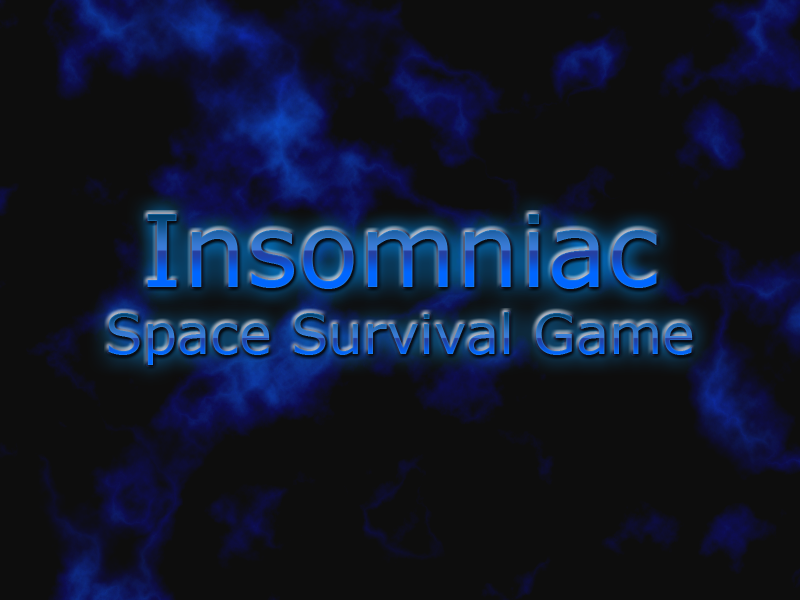
<style>
.page{position:relative;width:800px;height:600px;background:#0d0d0d}
.page>*{position:absolute;margin:0}
.t1{font:100px "Verdana"}
.t2{font:55px "Verdana"}
</style>
<div class="page">
<p class="t1" style="left:147px;top:214px;width:510px;height:75px">Insomniac</p>
<p class="t2" style="left:108px;top:312px;width:585px;height:53px">Space Survival Game</p>
</div>
